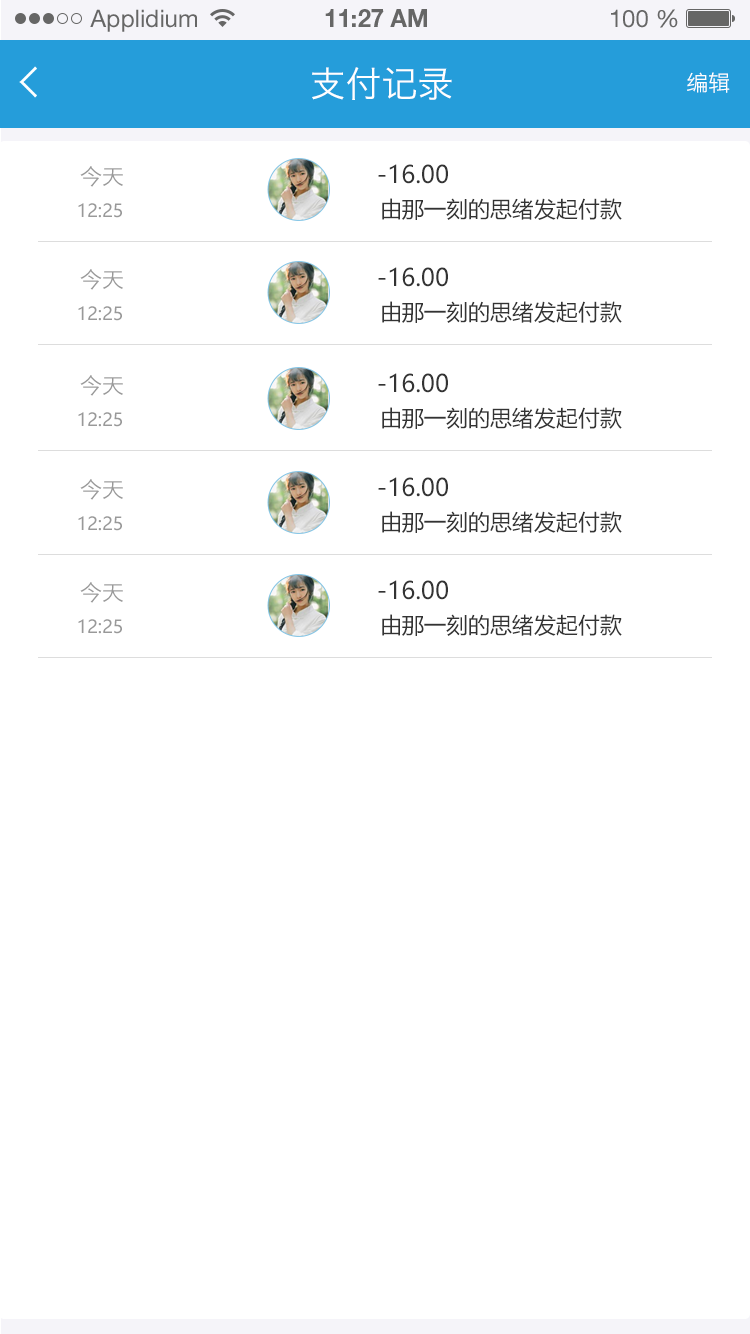
<style>
.page{position:relative;width:750px;height:1334px;background:#ffffff}
.page>*{position:absolute;margin:0}
.t1{font:24px "HelveticaNeueLTStd-Roman";color:#666666}
.t2{font:24px "HelveticaNeueLTStd-Bd";color:#666666}
.t3{font:36px "HiraginoSansGB-W3";color:#ffffff;text-transform:uppercase}
.t4{font:22px "HiraginoSansGB-W3";color:#ffffff;text-transform:uppercase}
.t5{font:22px "HiraginoSansGB-W3";color:#999999;text-transform:uppercase}
.t6{font:24px "MicrosoftYaHei";color:#333333;text-transform:uppercase}
.t7{font:22px "MicrosoftYaHei";color:#333333;text-transform:uppercase}
.t8{font:18px "MicrosoftYaHei";color:#999999;text-transform:uppercase}
</style>
<div class="page">
<p class="t1" style="left:90px;top:9px;width:107px;height:23px">Applidium</p>
<p class="t2" style="left:325px;top:9px;width:102px;height:18px">11:27 AM</p>
<p class="t1" style="left:611px;top:9px;width:67px;height:19px">100 %</p>
<p class="t3" style="left:312px;top:67px;width:140px;height:33px">支付记录</p>
<p class="t4" style="left:687px;top:72px;width:43px;height:21px">编辑</p>
<p class="t5" style="left:80px;top:166px;width:43px;height:21px">今天</p>
<p class="t6" style="left:378px;top:164px;width:70px;height:20px">-16.00</p>
<p class="t7" style="left:382px;top:198px;width:240px;height:22px">由那一刻的思绪发起付款</p>
<p class="t8" style="left:78px;top:203px;width:44px;height:15px">12:25</p>
<p class="t5" style="left:80px;top:269px;width:43px;height:21px">今天</p>
<p class="t6" style="left:378px;top:267px;width:70px;height:20px">-16.00</p>
<p class="t7" style="left:382px;top:301px;width:240px;height:22px">由那一刻的思绪发起付款</p>
<p class="t8" style="left:78px;top:306px;width:44px;height:15px">12:25</p>
<p class="t5" style="left:80px;top:375px;width:43px;height:21px">今天</p>
<p class="t6" style="left:378px;top:373px;width:70px;height:20px">-16.00</p>
<p class="t8" style="left:78px;top:412px;width:44px;height:15px">12:25</p>
<p class="t7" style="left:382px;top:407px;width:240px;height:22px">由那一刻的思绪发起付款</p>
<p class="t5" style="left:80px;top:479px;width:43px;height:21px">今天</p>
<p class="t6" style="left:378px;top:477px;width:70px;height:20px">-16.00</p>
<p class="t8" style="left:78px;top:516px;width:44px;height:15px">12:25</p>
<p class="t7" style="left:382px;top:511px;width:240px;height:22px">由那一刻的思绪发起付款</p>
<p class="t5" style="left:80px;top:582px;width:43px;height:21px">今天</p>
<p class="t6" style="left:378px;top:580px;width:70px;height:20px">-16.00</p>
<p class="t7" style="left:382px;top:614px;width:240px;height:22px">由那一刻的思绪发起付款</p>
<p class="t8" style="left:78px;top:619px;width:44px;height:15px">12:25</p>
</div>
